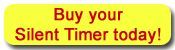
<style>
.page{position:relative;width:175px;height:50px;background:#f8ff3d}
.page>*{position:absolute;margin:0}
.t1{font:16.7px "ArialMT";color:#cc0000;font-weight:bold}
</style>
<div class="page">
<p class="t1" style="left:15px;top:8px;width:146px;height:36px;text-align:center">Buy your<br>Silent Timer today!</p>
</div>
